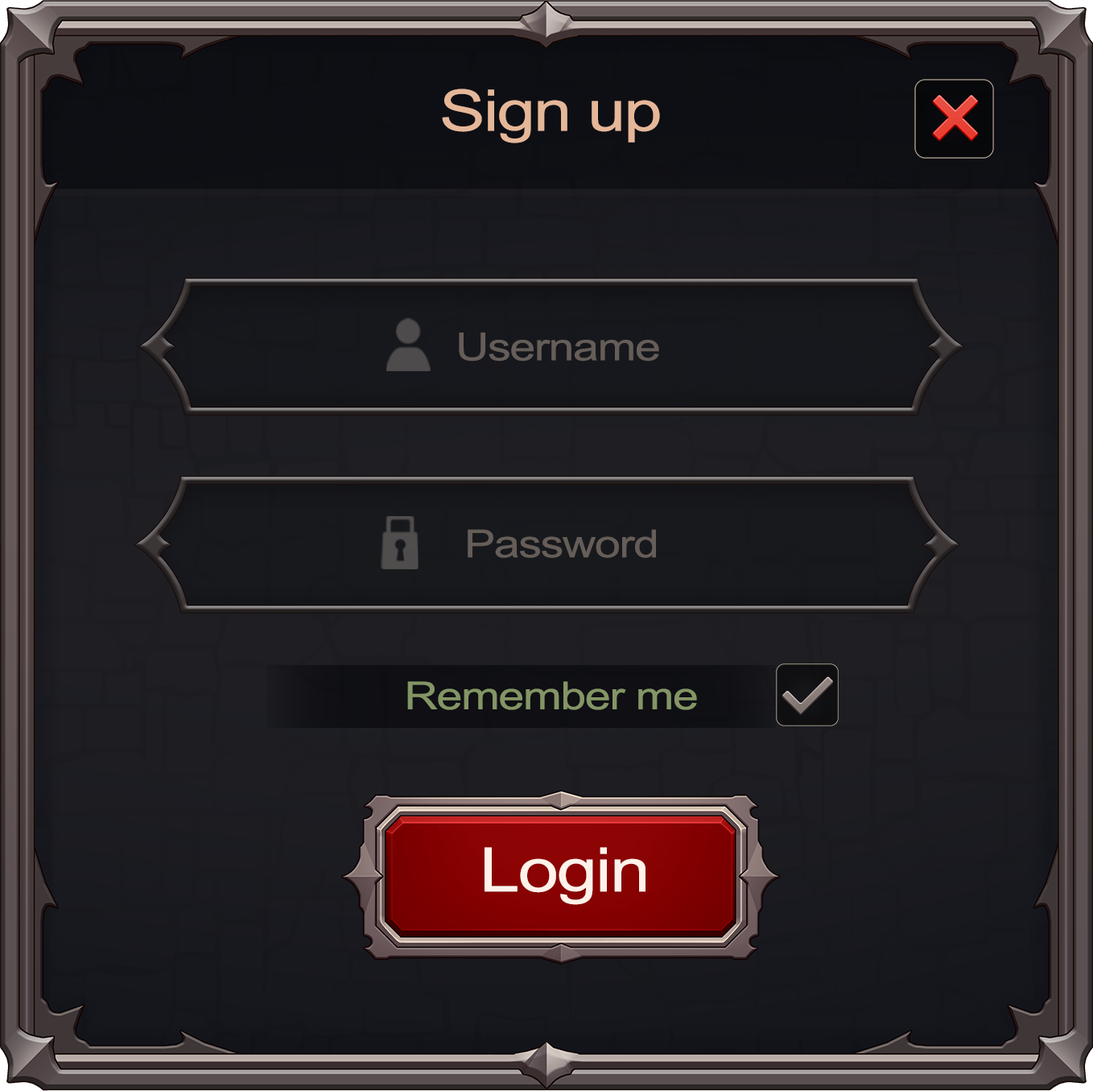
<style>
.page{position:relative;width:1093px;height:1091px}
.page>*{position:absolute;margin:0}
.t1{font:57.3px "ArialMT";letter-spacing:-0.025em;color:#e5b799;scale:1.2 1}
.t2{font:38.5px "ArialMT";letter-spacing:-0.025em;color:#655d58;scale:1.2 1}
.t3{font:38.5px "ArialMT";letter-spacing:-0.025em;color:#849565;scale:1.2 1}
.t4{font:61.2px "ArialMT";letter-spacing:-0.025em;color:#fff2ea;scale:1.19 1}
</style>
<div class="page">
<p class="t1" style="left:442px;top:89px;width:218px;height:54px">Sign up</p>
<p class="t2" style="left:459px;top:332px;width:200px;height:29px">Username</p>
<p class="t2" style="left:468px;top:529px;width:188px;height:29px">Password</p>
<p class="t3" style="left:407px;top:681px;width:290px;height:29px">Remember me</p>
<p class="t4" style="left:485px;top:847px;width:161px;height:58px">Login</p>
</div>
